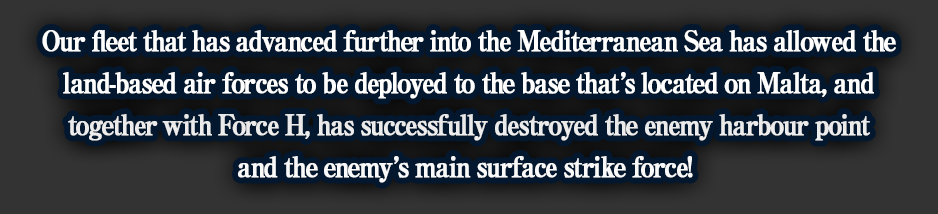
<style>
.page{position:relative;width:938px;height:214px;background:#03172f}
.page>*{position:absolute;margin:0}
.t1{font:28px/42px "RyuminPro-ExBold";letter-spacing:-0.08em;color:#ffffff;font-weight:bold;scale:0.9 1}
</style>
<div class="page">
<p class="t1" style="left:42px;top:30px;width:854px;height:153px;text-align:center">Our fleet that has advanced further into the Mediterranean Sea has allowed the<br>land-based air forces to be deployed to the base that’s located on Malta, and<br>together with Force H, has successfully destroyed the enemy harbour point<br>and the enemy’s main surface strike force!</p>
</div>
